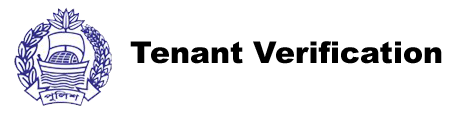
<style>
.page{position:relative;width:459px;height:114px;background:#ffffff}
.page>*{position:absolute;margin:0}
.t1{font:30px "Arial-Black";color:#000000}
</style>
<div class="page">
<p class="t1" style="left:130px;top:41px;width:312px;height:23px">Tenant Verification</p>
</div>
